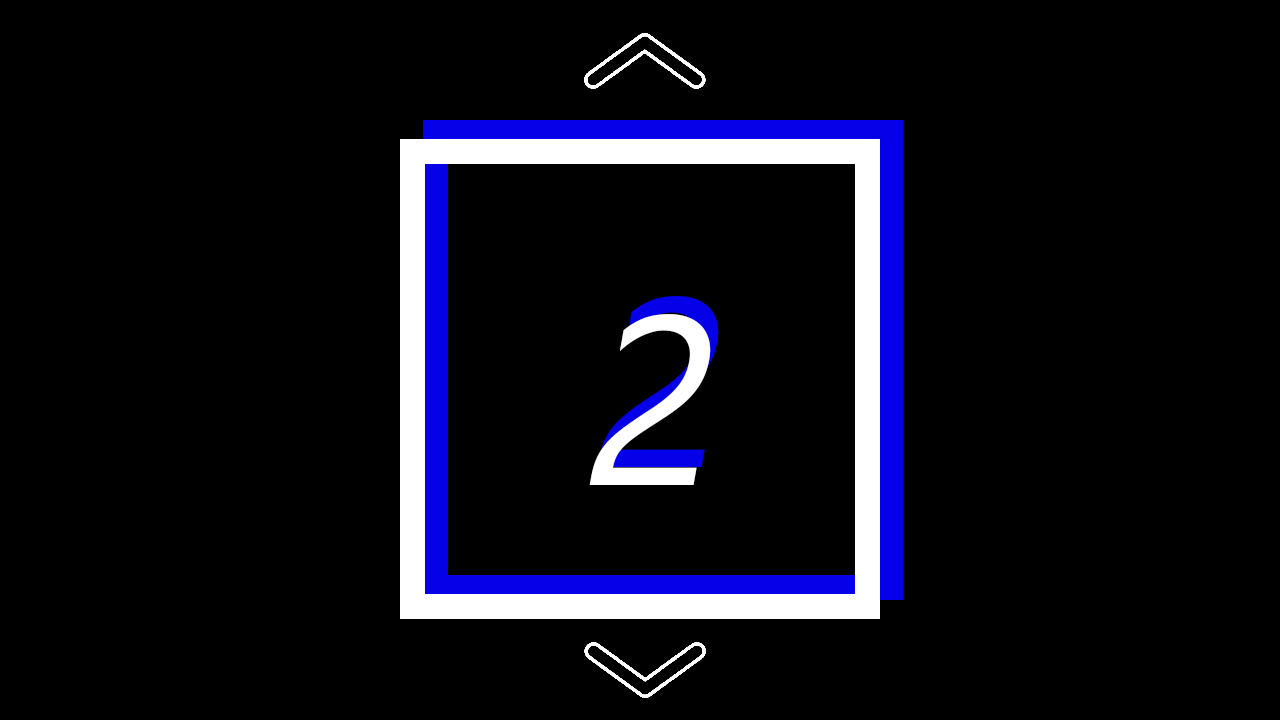
<style>
.page{position:relative;width:1280px;height:720px;background:#000000}
.page>*{position:absolute;margin:0}
.t1{font:240px "SegoeUIHistoric";color:#0600e9;font-style:italic}
.t2{font:240px "SegoeUIHistoric";color:#ffffff;font-style:italic}
</style>
<div class="page">
<p class="t1" style="left:597px;top:296px;width:122px;height:171px">2</p>
<p class="t2" style="left:589px;top:314px;width:122px;height:171px">2</p>
</div>
